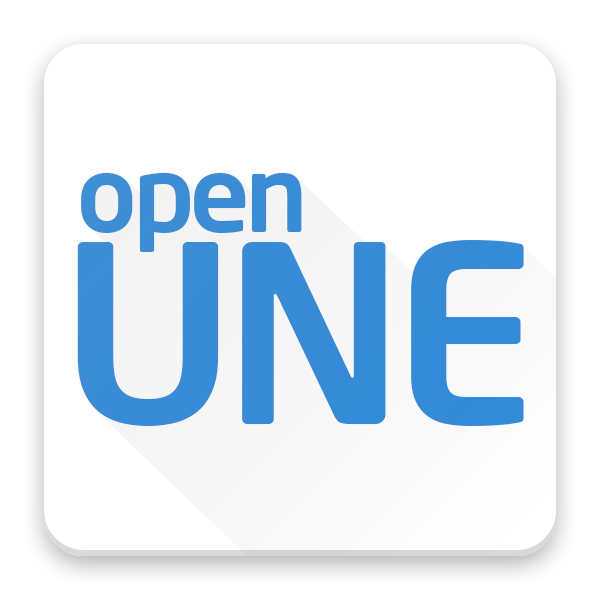
<style>
.page{position:relative;width:600px;height:600px;background:#ffffff}
.page>*{position:absolute;margin:0}
.t1{font:102.8px "NeoSans-Medium";letter-spacing:-0.05em;color:#328cdc;scale:1.04 1}
.t2{font:244.9px "NeoSans-Medium";letter-spacing:-0.05em;color:#328cdc;scale:1.04 1}
</style>
<div class="page">
<p class="t1" style="left:81px;top:173px;width:221px;height:79px">open</p>
<p class="t2" style="left:77px;top:240px;width:447px;height:186px">UNE</p>
</div>
